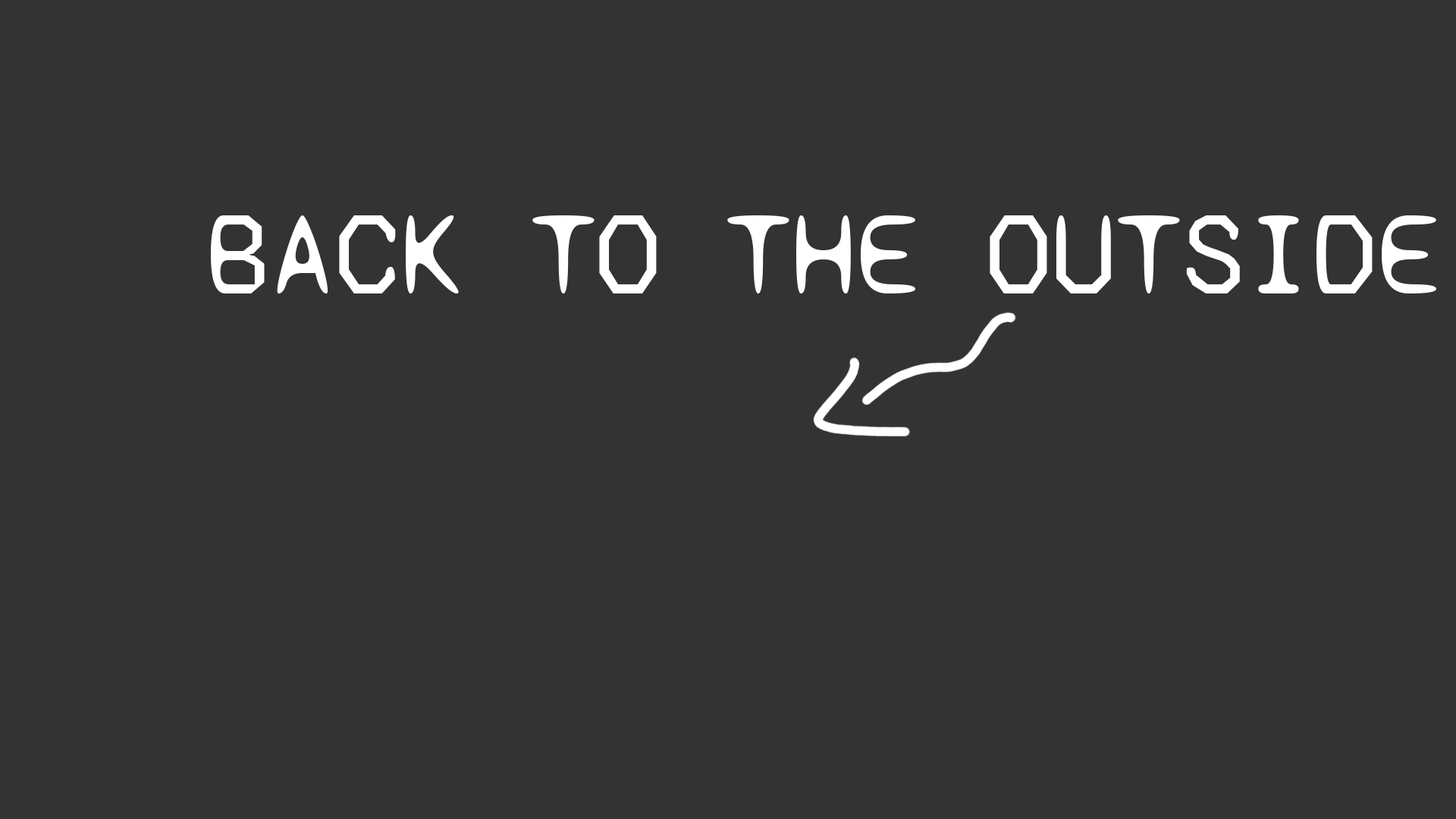
<style>
.page{position:relative;width:1456px;height:819px;background:#333333}
.page>*{position:absolute;margin:0}
.t1{font:118.3px "SyneMono-Regular";color:#ffffff}
</style>
<div class="page">
<p class="t1" style="left:211px;top:215px;width:1225px;height:78px">BACK TO THE OUTSIDE</p>
</div>
